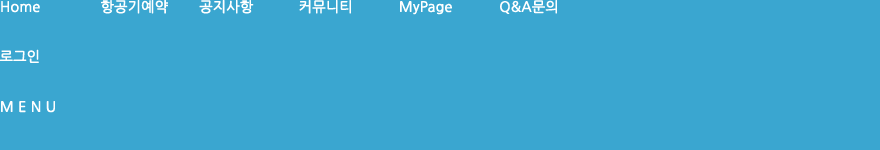
<style>
.page{position:relative;width:880px;height:150px;background:#3aa6d0}
.page>*{position:absolute;margin:0}
.t1{font:14px "NanumGothic";color:#ffffff;font-weight:bold}
</style>
<div class="page">
<p class="t1" style="left:1px;top:1px;width:39px;height:12px">Home</p>
<p class="t1" style="left:101px;top:0px;width:67px;height:14px">항공기예약</p>
<p class="t1" style="left:199px;top:0px;width:55px;height:14px">공지사항</p>
<p class="t1" style="left:299px;top:0px;width:52px;height:14px">커뮤니티</p>
<p class="t1" style="left:400px;top:1px;width:52px;height:14px">MyPage</p>
<p class="t1" style="left:500px;top:0px;width:57px;height:14px">Q&amp;A문의</p>
<p class="t1" style="left:0px;top:49px;width:39px;height:14px">로그인</p>
<p class="t1" style="left:1px;top:101px;width:54px;height:12px">M E N U</p>
</div>
